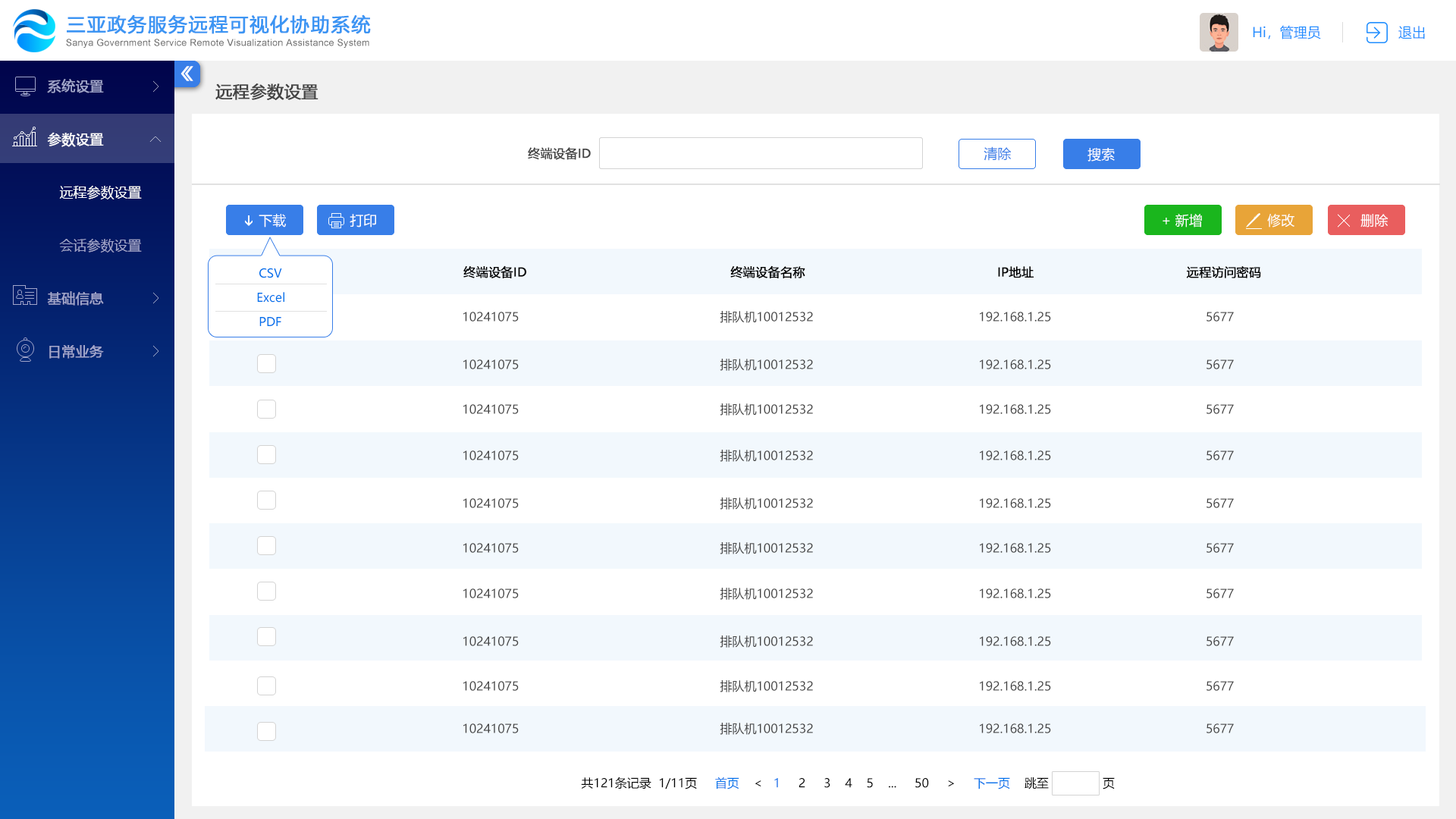
<style>
.page{position:relative;width:1456px;height:819px;background:#ffffff}
.page>*{position:absolute;margin:0}
.t1{font:19px "MicrosoftYaHei";letter-spacing:0.05em;color:#3c95f3;font-weight:bold}
.t2{font:13.6px "MicrosoftYaHei";color:#208eff}
.t3{font:9.5px "ArialMT";letter-spacing:0.025em;color:#666666}
.t4{font:14.9px "MicrosoftYaHei";color:#ffffff;font-weight:bold;scale:1.77 1}
.t5{font:13.6px/53.1px "MicrosoftYaHei";color:#a1a5ca;font-weight:bold}
.t6{font:13.6px/53.1px "MicrosoftYaHei";color:#ffffff;font-weight:bold}
.t7{font:13.6px/53.1px "MicrosoftYaHei";color:#ffffff}
.t8{font:13.6px/53.1px "MicrosoftYaHei";color:#a1a5ca}
.t9{font:16.7px "MicrosoftYaHei";color:#444444;font-weight:bold}
.t10{font:12.1px "MicrosoftYaHei";color:#444444;font-weight:bold}
.t11{font:13.6px "MicrosoftYaHei";color:#387ee8}
.t12{font:13.6px "MicrosoftYaHei";color:#ffffff}
.t13{font:12.1px "MicrosoftYaHei";color:#0072eb}
.t14{font:12.1px "MicrosoftYaHei";color:#000000;font-weight:bold}
.t15{font:12.1px "MicrosoftYaHei";color:#444444}
.t16{font:12.1px "MicrosoftYaHei";color:#000000}
</style>
<div class="page">
<p class="t1" style="left:67px;top:14px;width:304px;height:20px">三亚政务服务远程可视化协助系统</p>
<p class="t2" style="left:1253px;top:25px;width:68px;height:14px">Hi，管理员</p>
<p class="t2" style="left:1398px;top:26px;width:27px;height:13px">退出</p>
<p class="t3" style="left:66px;top:39px;width:303px;height:9px">Sanya Government Service Remote Visualization Assistance System</p>
<p class="t4" style="left:180px;top:66px;width:13px;height:15px">《</p>
<p class="t5" style="left:47px;top:79px;width:95px;height:280px">系统设置<br><span class="t6">参数设置<br></span><span class="t7">   远程参数设置<br>   </span><span class="t8">会话参数设置<br></span>基础信息<br>日常业务</p>
<p class="t9" style="left:215px;top:83px;width:103px;height:17px">远程参数设置</p>
<p class="t10" style="left:528px;top:147px;width:63px;height:13px">终端设备ID</p>
<p class="t11" style="left:984px;top:146px;width:28px;height:15px">清除</p>
<p class="t12" style="left:1087px;top:148px;width:28px;height:14px">搜索</p>
<p class="t12" style="left:259px;top:214px;width:27px;height:13px">下载</p>
<p class="t12" style="left:350px;top:214px;width:26px;height:13px">打印</p>
<p class="t12" style="left:1163px;top:214px;width:39px;height:13px">+ 新增</p>
<p class="t12" style="left:1267px;top:214px;width:27px;height:13px">修改</p>
<p class="t12" style="left:1360px;top:214px;width:28px;height:13px">删除</p>
<p class="t13" style="left:259px;top:268px;width:23px;height:10px">CSV</p>
<p class="t14" style="left:281px;top:265px;width:980px;height:13px">全选                                        终端设备ID                                                    终端设备名称                                                 IP地址                                       远程访问密码</p>
<p class="t13" style="left:257px;top:292px;width:27px;height:11px">Excel</p>
<p class="t13" style="left:259px;top:317px;width:22px;height:9px">PDF</p>
<p class="t15" style="left:463px;top:311px;width:771px;height:12px">10241075                                                        排队机10012532                                              192.168.1.25                                           5677</p>
<p class="t15" style="left:463px;top:359px;width:771px;height:12px">10241075                                                        排队机10012532                                              192.168.1.25                                           5677</p>
<p class="t15" style="left:463px;top:403px;width:771px;height:13px">10241075                                                        排队机10012532                                              192.168.1.25                                           5677</p>
<p class="t15" style="left:463px;top:450px;width:771px;height:12px">10241075                                                        排队机10012532                                              192.168.1.25                                           5677</p>
<p class="t15" style="left:463px;top:497px;width:771px;height:13px">10241075                                                        排队机10012532                                              192.168.1.25                                           5677</p>
<p class="t15" style="left:463px;top:542px;width:771px;height:12px">10241075                                                        排队机10012532                                              192.168.1.25                                           5677</p>
<p class="t15" style="left:463px;top:588px;width:771px;height:12px">10241075                                                        排队机10012532                                              192.168.1.25                                           5677</p>
<p class="t15" style="left:463px;top:635px;width:771px;height:13px">10241075                                                        排队机10012532                                              192.168.1.25                                           5677</p>
<p class="t15" style="left:463px;top:680px;width:771px;height:12px">10241075                                                        排队机10012532                                              192.168.1.25                                           5677</p>
<p class="t15" style="left:463px;top:723px;width:771px;height:12px">10241075                                                        排队机10012532                                              192.168.1.25                                           5677</p>
<p class="t16" style="left:581px;top:777px;width:534px;height:12px">共121条记录  1/11页     <span class="t13">首页</span>    &lt;   <span class="t13">1 </span>    2     3    4    5    ...     50     &gt;     <span class="t13">下一页</span>    跳至               页</p>
</div>
